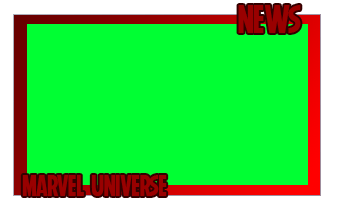
<style>
.page{position:relative;width:337px;height:209px;background:#00ff33}
.page>*{position:absolute;margin:0}
.t1{font:40px "Marvel-Regular";color:#990000}
.t2{font:30px "Marvel-Regular";color:#990000}
</style>
<div class="page">
<p class="t1" style="left:238px;top:5px;width:63px;height:28px">NEWS</p>
<p class="t2" style="left:22px;top:175px;width:145px;height:21px">MARVEL UNIVERSE</p>
</div>
